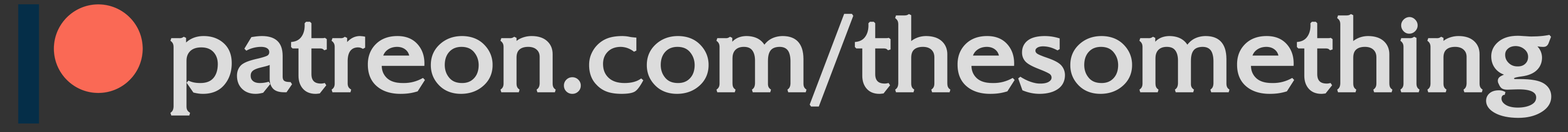
<style>
.page{position:relative;width:1568px;height:132px;background:#333333}
.page>*{position:absolute;margin:0}
.t1{font:105.9px "FrizQuadrataC";letter-spacing:0.01em;color:#dcdcdc;font-weight:bold}
</style>
<div class="page">
<p class="t1" style="left:170px;top:14px;width:1382px;height:105px">patreon.com/thesomething</p>
</div>
